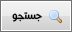
<style>
.page{position:relative;width:72px;height:32px}
.page>*{position:absolute;margin:0}
.t1{font:12px "Mj_CasablancaLight";color:#030000}
</style>
<div class="page">
<p class="t1" style="left:12px;top:12px;width:30px;height:10px">جستجو</p>
</div>
